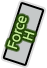
<style>
.page{position:relative;width:47px;height:68px;background:#ffffff}
.page>*{position:absolute;margin:0}
.t1{font:12px/12px "UDShinGoPro-Light";color:#c6ed99;font-weight:bold}
</style>
<div class="page">
<p class="t1" style="left:7px;top:16px;width:28px;height:33px;text-align:center;rotate:-72deg">Force<br>H</p>
</div>
